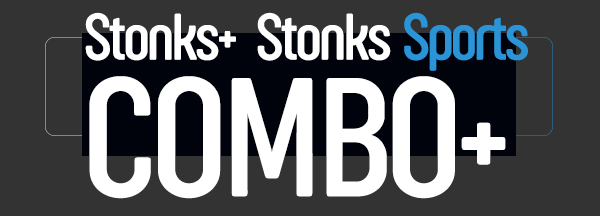
<style>
.page{position:relative;width:600px;height:216px;background:#333333}
.page>*{position:absolute;margin:0}
.t1{font:68.1px "SugoProDisplayTrial-Light";letter-spacing:-0.03em;color:#ffffff;scale:1.05 1}
.t2{font:68.1px "SugoProDisplayTrial-Light";letter-spacing:-0.03em;color:#2b94d6;scale:1.05 1}
.t3{font:175.1px "SugoProClassicTrial-Light";letter-spacing:-0.03em;color:#ffffff;scale:1.05 1}
</style>
<div class="page">
<p class="t1" style="left:85px;top:12px;width:151px;height:49px">Stonks+</p>
<p class="t1" style="left:257px;top:12px;width:271px;height:59px">Stonks <span class="t2">Sports</span></p>
<p class="t3" style="left:89px;top:76px;width:417px;height:123px">COMBO+</p>
</div>
